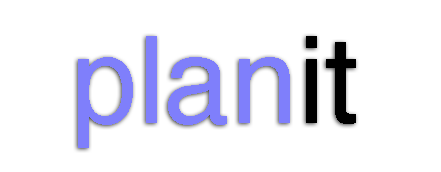
<style>
.page{position:relative;width:441px;height:172px;background:#ffffff}
.page>*{position:absolute;margin:0}
.t1{font:120px "Helvetica";color:#7f7ffc}
.t2{font:120px "Helvetica";color:#000000}
</style>
<div class="page">
<p class="t1" style="left:78px;top:36px;width:278px;height:112px">plan<span class="t2">it</span></p>
</div>
